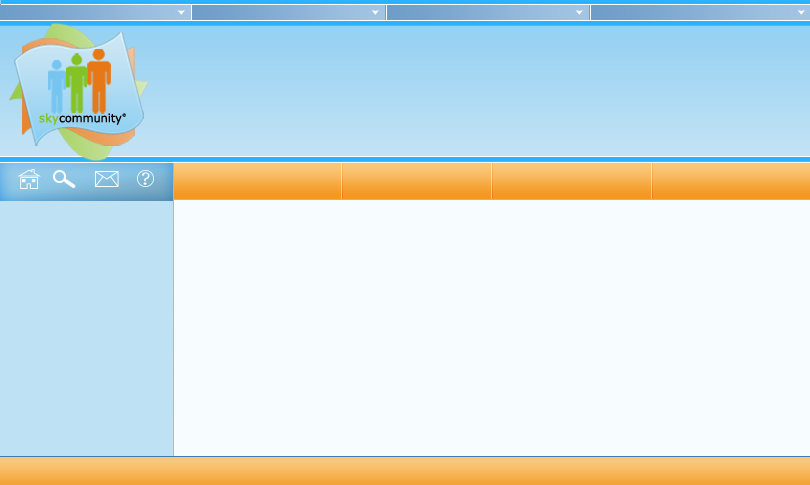
<style>
.page{position:relative;width:810px;height:485px;background:#f7fcff}
.page>*{position:absolute;margin:0}
.t1{font:11.7px "Verdana";color:#000000;scale:0.96 1}
.t2{font:11.7px "Verdana";color:#85c226;font-weight:bold;scale:0.96 1}
.t3{font:3.9px "Verdana";scale:0.96 1}
</style>
<div class="page">
<p class="t1" style="left:39px;top:113px;width:83px;height:12px"><span class="t2">sky</span>community</p>
<p class="t3" style="left:122px;top:113px;width:4px;height:4px">©</p>
</div>
